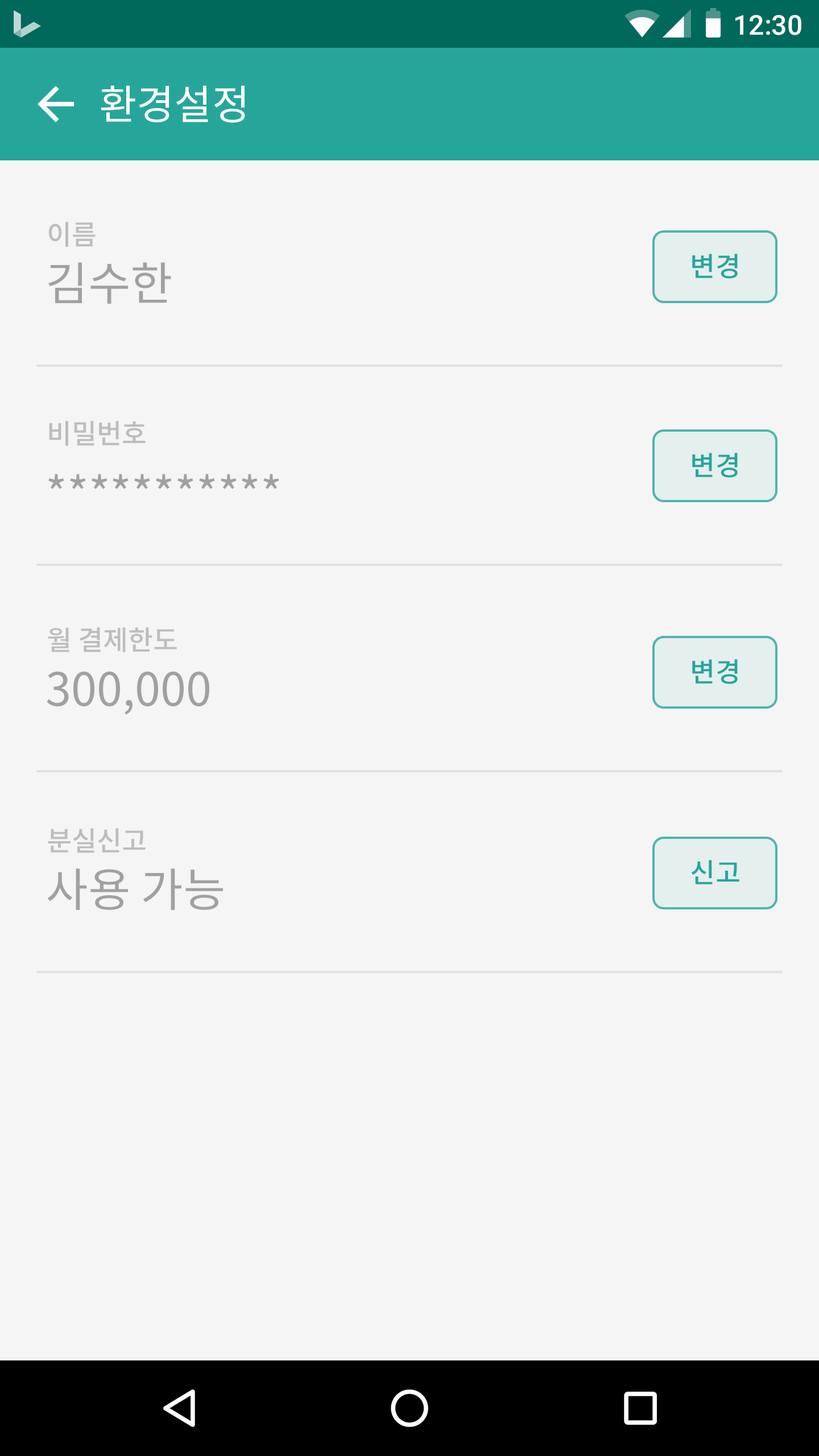
<style>
.page{position:relative;width:819px;height:1456px;background:#f5f5f5}
.page>*{position:absolute;margin:0}
.t1{font:27.3px "Roboto-Medium";color:#ffffff}
.t2{font:40.9px "NotoSansCJKkr-Regular";color:#ffffff}
.t3{font:27.3px "NotoSansCJKkr-Medium";color:#bdbdbd}
.t4{font:27.3px "NotoSansCJKkr-Medium";color:#26a69a}
.t5{font:46.1px "NotoSansCJKkr-Regular";color:#a1a1a1}
</style>
<div class="page">
<p class="t1" style="left:735px;top:15px;width:66px;height:20px">12:30</p>
<p class="t2" style="left:101px;top:85px;width:144px;height:38px">환경설정</p>
<p class="t3" style="left:49px;top:222px;width:47px;height:25px">이름</p>
<p class="t4" style="left:692px;top:254px;width:46px;height:25px">변경</p>
<p class="t5" style="left:48px;top:262px;width:123px;height:42px">김수한</p>
<p class="t3" style="left:49px;top:421px;width:97px;height:25px">비밀번호</p>
<p class="t4" style="left:692px;top:453px;width:46px;height:25px">변경</p>
<p class="t5" style="left:48px;top:474px;width:231px;height:15px">***********</p>
<p class="t3" style="left:48px;top:627px;width:129px;height:25px">월 결제한도</p>
<p class="t4" style="left:692px;top:659px;width:46px;height:25px">변경</p>
<p class="t5" style="left:47px;top:671px;width:162px;height:44px">300,000</p>
<p class="t3" style="left:48px;top:828px;width:98px;height:25px">분실신고</p>
<p class="t5" style="left:47px;top:868px;width:176px;height:42px">사용 가능</p>
<p class="t4" style="left:691px;top:860px;width:48px;height:24px">신고</p>
</div>
